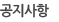
<style>
.page{position:relative;width:59px;height:22px;background:#ffffff}
.page>*{position:absolute;margin:0}
.t1{font:14px "NanumGothicBold";letter-spacing:-0.05em;color:#454545;scale:0.97 1}
</style>
<div class="page">
<p class="t1" style="left:0px;top:3px;width:49px;height:15px">공지사항</p>
</div>
